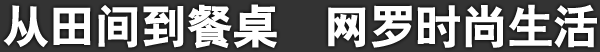
<style>
.page{position:relative;width:600px;height:52px;background:#ffffff}
.page>*{position:absolute;margin:0}
.t1{font:46px "HYb2gj";letter-spacing:-0.03em;color:#ffffff;font-weight:bold}
</style>
<div class="page">
<p class="t1" style="left:3px;top:4px;width:594px;height:45px">从田间到餐桌  网罗时尚生活</p>
</div>
